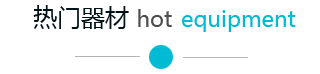
<style>
.page{position:relative;width:320px;height:74px;background:#ffffff}
.page>*{position:absolute;margin:0}
.t1{font:24px "MicrosoftYaHei";color:#001316}
.t2{font:22px "MicrosoftYaHei";color:#4d4d4d}
.t3{font:22px "MicrosoftYaHei";color:#00bbd3}
</style>
<div class="page">
<p class="t1" style="left:33px;top:5px;width:96px;height:24px">热门器材</p>
<p class="t2" style="left:138px;top:9px;width:34px;height:18px">hot</p>
<p class="t3" style="left:182px;top:10px;width:114px;height:22px">equipment</p>
</div>
